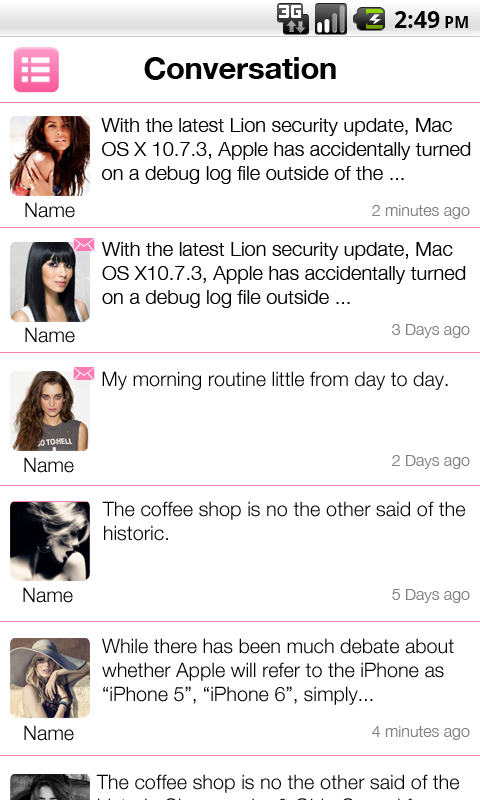
<style>
.page{position:relative;width:480px;height:800px;background:#ffffff}
.page>*{position:absolute;margin:0}
.t1{font:30px "HelveticaNeue-Bold";color:#000000}
.t2{font:20px "HelveticaNeue-Light";color:#000000}
.t3{font:16px "HelveticaNeue-Light";color:#818181}
.t4{font:20px "HelveticaNeue-Light";color:#040404}
</style>
<div class="page">
<p class="t1" style="left:144px;top:57px;width:192px;height:23px">Conversation</p>
<p class="t2" style="left:101px;top:118px;width:370px;height:66px">With the latest Lion security update, Mac OS X 10.7.3, Apple has accidentally turned on a debug log file outside of the ...</p>
<p class="t2" style="left:25px;top:202px;width:50px;height:16px">Name</p>
<p class="t3" style="left:372px;top:205px;width:98px;height:14px">2 minutes ago</p>
<p class="t2" style="left:101px;top:242px;width:365px;height:66px">With the latest Lion security update, Mac OS X10.7.3, Apple has accidentally turned on a debug log file outside ...</p>
<p class="t2" style="left:25px;top:327px;width:50px;height:16px">Name</p>
<p class="t3" style="left:392px;top:324px;width:78px;height:14px">3 Days ago</p>
<p class="t4" style="left:102px;top:371px;width:346px;height:19px">My morning routine little from day to day.</p>
<p class="t2" style="left:24px;top:457px;width:50px;height:16px">Name</p>
<p class="t3" style="left:392px;top:455px;width:78px;height:14px">2 Days ago</p>
<p class="t4" style="left:102px;top:501px;width:363px;height:40px">The coffee shop is no the other said of the historic.</p>
<p class="t2" style="left:23px;top:587px;width:50px;height:16px">Name</p>
<p class="t3" style="left:392px;top:589px;width:78px;height:14px">5 Days ago</p>
<p class="t2" style="left:102px;top:638px;width:352px;height:67px">While there has been much debate about whether Apple will refer to the iPhone as “iPhone 5”, “iPhone 6”, simply...</p>
<p class="t2" style="left:24px;top:725px;width:50px;height:16px">Name</p>
<p class="t3" style="left:372px;top:726px;width:98px;height:14px">4 minutes ago</p>
</div>
